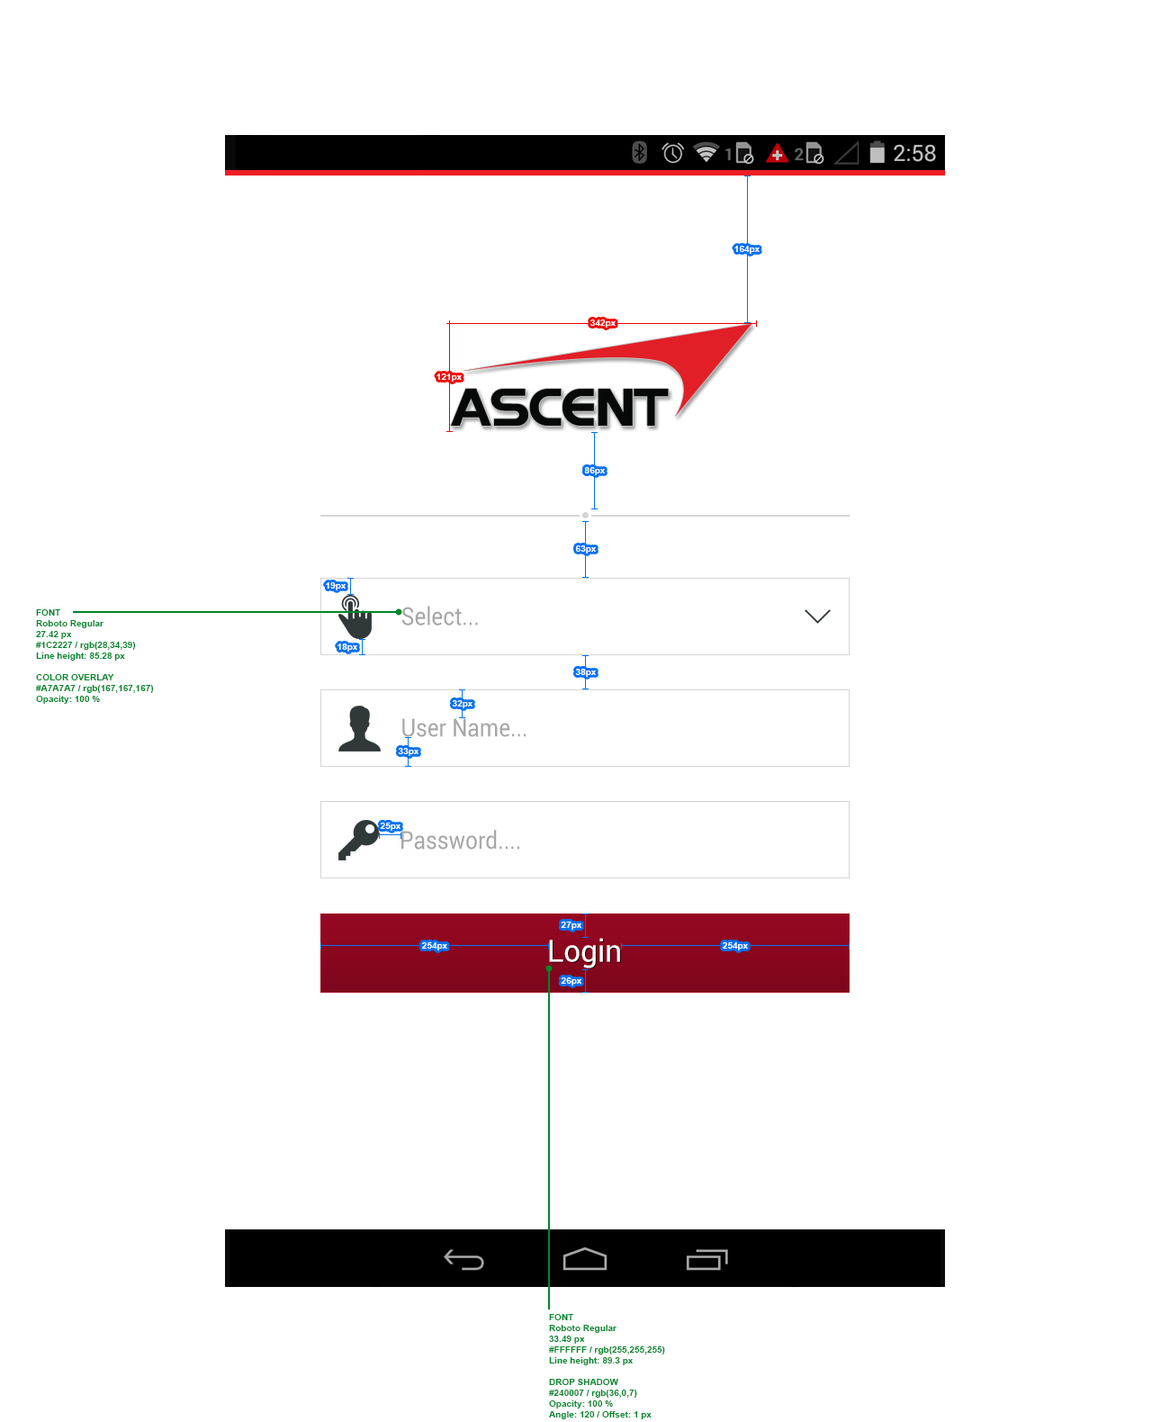
<style>
.page{position:relative;width:1170px;height:1422px;background:#ffffff}
.page>*{position:absolute;margin:0}
.t1{font:9px "Arial-BoldMT";color:#ffffff}
.t2{font:24.7px "Roboto-Regular";color:#a7a7a7;scale:0.89 1}
.t3{font:9px "Arial-BoldMT";color:#00872b}
.t4{font:30.1px "Roboto-Regular";color:#ffffff}
</style>
<div class="page">
<p class="t1" style="left:734px;top:246px;width:26px;height:8px">164px</p>
<p class="t1" style="left:590px;top:320px;width:26px;height:8px">342px</p>
<p class="t1" style="left:436px;top:374px;width:26px;height:8px">121px</p>
<p class="t1" style="left:584px;top:467px;width:21px;height:8px">86px</p>
<p class="t1" style="left:575px;top:545px;width:21px;height:9px">63px</p>
<p class="t1" style="left:326px;top:582px;width:20px;height:8px">19px</p>
<p class="t2" style="left:401px;top:606px;width:77px;height:20px">Select...</p>
<p class="t3" style="left:36px;top:609px;width:118px;height:95px">FONT <br>Roboto Regular<br>27.42 px<br>#1C2227 / rgb(28,34,39)<br>Line height: 85.28 px<br><br>COLOR OVERLAY<br>#A7A7A7 / rgb(167,167,167)<br>Opacity: 100 %</p>
<p class="t1" style="left:338px;top:644px;width:19px;height:8px">18px</p>
<p class="t1" style="left:575px;top:669px;width:21px;height:8px">38px</p>
<p class="t1" style="left:452px;top:700px;width:20px;height:8px">32px</p>
<p class="t2" style="left:402px;top:718px;width:124px;height:19px">User Name...</p>
<p class="t1" style="left:398px;top:748px;width:20px;height:8px">33px</p>
<p class="t1" style="left:380px;top:823px;width:20px;height:8px">25px</p>
<p class="t2" style="left:401px;top:830px;width:118px;height:20px">Password....</p>
<p class="t1" style="left:561px;top:922px;width:20px;height:8px">27px</p>
<p class="t4" style="left:549px;top:938px;width:71px;height:30px">Login</p>
<p class="t1" style="left:422px;top:942px;width:25px;height:8px">254px</p>
<p class="t1" style="left:723px;top:942px;width:25px;height:8px">254px</p>
<p class="t1" style="left:561px;top:977px;width:20px;height:9px">26px</p>
</div>
